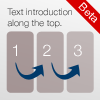
<style>
.page{position:relative;width:100px;height:100px}
.page>*{position:absolute;margin:0}
.t1{font:11px "HelveticaNeue";letter-spacing:0.01em;color:#ffffff}
.t2{font:9px "HelveticaNeue-Light";letter-spacing:0.01em}
.t3{font:16px "HelveticaNeue-Light";letter-spacing:0.01em;color:#ffffff}
</style>
<div class="page">
<p class="t1" style="left:78px;top:2px;width:20px;height:21px;rotate:45deg">Beta</p>
<p class="t2" style="left:7px;top:8px;width:65px;height:20px">Text introduction<br>along the top.</p>
<p class="t3" style="left:13px;top:44px;width:4px;height:12px">1</p>
<p class="t3" style="left:43px;top:44px;width:8px;height:12px">2</p>
<p class="t3" style="left:74px;top:44px;width:8px;height:13px">3</p>
</div>
